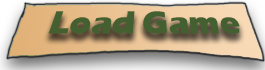
<style>
.page{position:relative;width:265px;height:70px}
.page>*{position:absolute;margin:0}
.t1{font:33.3px "ErasITC-Bold";color:#446030}
</style>
<div class="page">
<p class="t1" style="left:48px;top:11px;width:192px;height:23px">Load Game</p>
</div>
